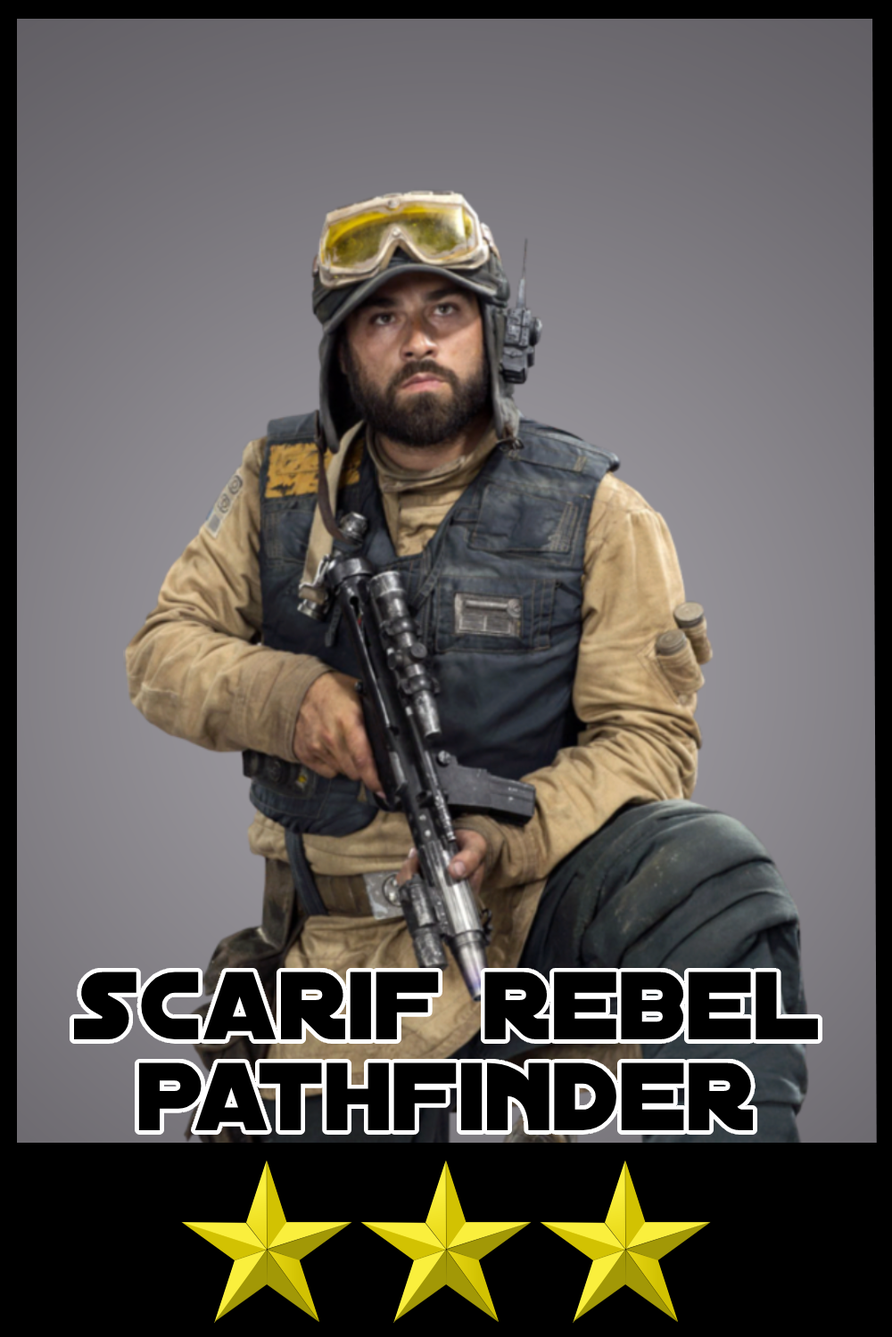
<style>
.page{position:relative;width:892px;height:1337px}
.page>*{position:absolute;margin:0}
.t1{font:103.4px/91.5px "DistantGalaxy";color:#000000}
</style>
<div class="page">
<p class="t1" style="left:74px;top:972px;width:744px;height:159px;text-align:center">scarif rebel<br>pathfinder</p>
</div>
